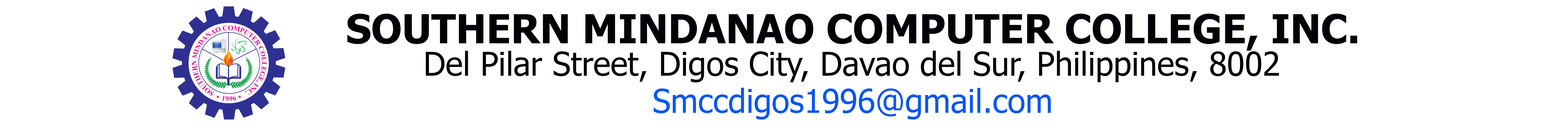
<style>
.page{position:relative;width:1568px;height:131px;background:#ffffff}
.page>*{position:absolute;margin:0}
.t1{font:39.9px "Tahoma-Bold";color:#000307}
.t2{font:32.7px "Tahoma";color:#000307}
.t3{font:32.7px "Tahoma";color:#0856f3}
</style>
<div class="page">
<p class="t1" style="left:347px;top:14px;width:1010px;height:36px">SOUTHERN MINDANAO COMPUTER COLLEGE, INC.</p>
<p class="t2" style="left:426px;top:50px;width:853px;height:32px">Del Pilar Street, Digos City, Davao del Sur, Philippines, 8002</p>
<p class="t3" style="left:654px;top:87px;width:397px;height:32px">Smccdigos1996@gmail.com</p>
</div>
